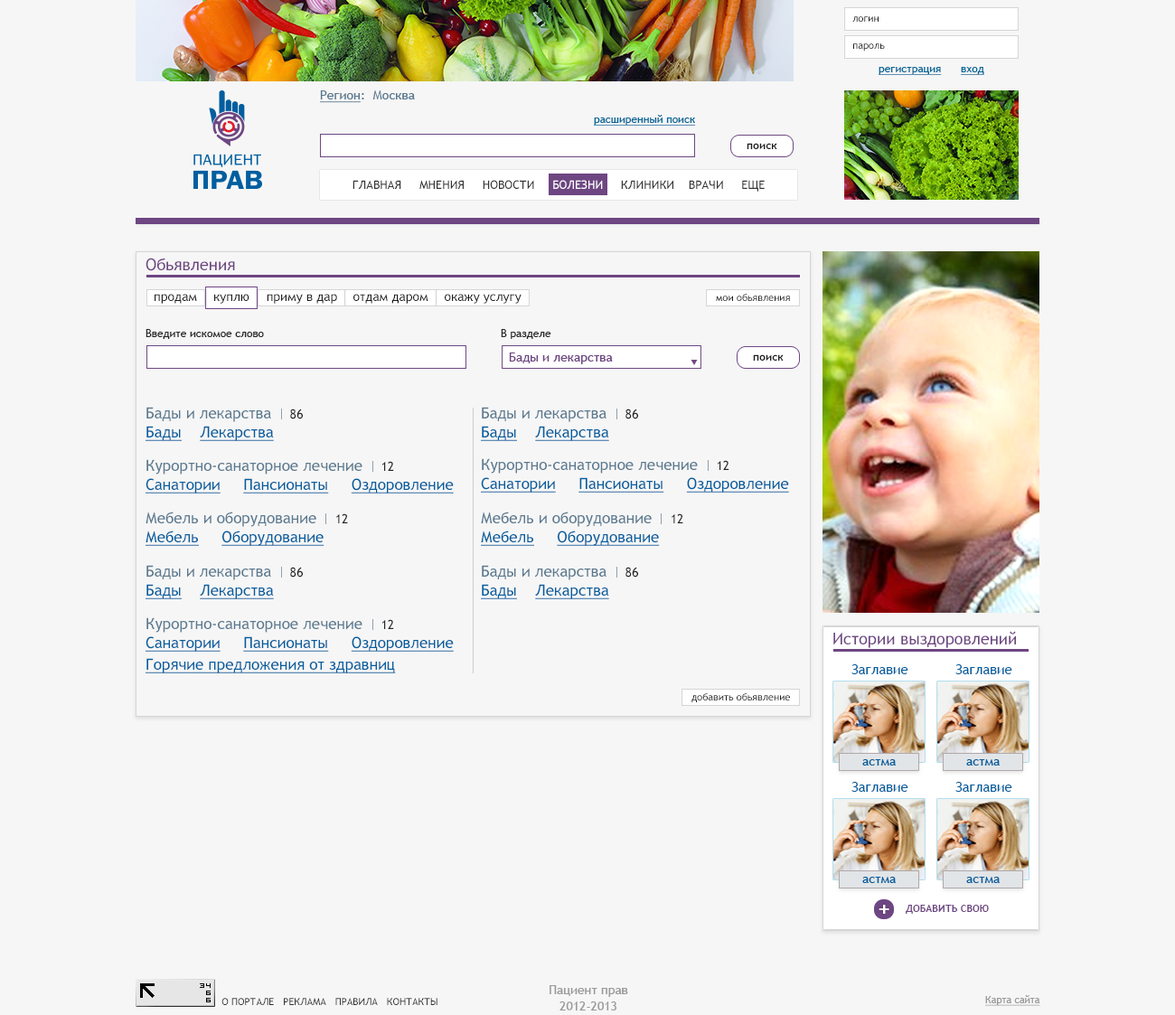
<style>
.page{position:relative;width:1175px;height:1015px;background:#f6f6f6}
.page>*{position:absolute;margin:0}
.t1{font:9.9px "TrebuchetMS";color:#1e1d1d}
.t2{font:10.8px "TrebuchetMS";color:#006699;text-decoration:underline}
.t3{font:12.7px "TrebuchetMS";color:#5a798f}
.t4{font:12.7px "TrebuchetMS";color:#5a798f;text-decoration:underline}
.t5{font:10.8px "TrebuchetMS-Bold";color:#1e1d1d}
.t6{font:11.7px "TrebuchetMS";color:#333333;text-transform:uppercase}
.t7{font:11.7px "TrebuchetMS";color:#ffffff;text-transform:uppercase}
.t8{font:16.3px "TrebuchetMS";color:#6e4682}
.t9{font:12.7px "TrebuchetMS";color:#1e1d1d}
.t10{font:10.8px "TrebuchetMS";color:#252627}
.t11{font:12.7px "TrebuchetMS";color:#6e4682}
.t12{font:15.4px/19px "TrebuchetMS";color:#005e9f;text-decoration:underline}
.t13{font:15.4px/16.3px "TrebuchetMS";color:#5a798f}
.t14{font:12.7px/12.7px "TrebuchetMS";color:#252627}
.t15{font:15.4px/21.7px "TrebuchetMS";color:#005e9f;text-decoration:underline}
.t16{font:13.6px "TrebuchetMS";color:#005e9f}
.t17{font:12.7px "TrebuchetMS";color:#005e9f}
.t18{font:21.7px "TrebuchetMS-Bold";color:#ffffff;text-transform:uppercase}
.t19{font:9.9px "TrebuchetMS-Bold";color:#6e4682;text-transform:uppercase}
.t20{font:12.7px/16.3px "TrebuchetMS";color:#999999}
.t21{font:9.9px "TrebuchetMS";color:#333333;text-transform:uppercase}
.t22{font:9.9px "TrebuchetMS";color:#999999;text-decoration:underline}
</style>
<div class="page">
<p class="t1" style="left:852px;top:16px;width:26px;height:6px">логин</p>
<p class="t1" style="left:853px;top:43px;width:32px;height:9px">пароль</p>
<p class="t2" style="left:878px;top:67px;width:106px;height:8px">регистрация      вход</p>
<p class="t3" style="left:320px;top:90px;width:95px;height:13px"><span class="t4">Регион</span>:  Москва</p>
<p class="t2" style="left:594px;top:115px;width:102px;height:11px">расширенный поиск</p>
<p class="t5" style="left:747px;top:143px;width:30px;height:6px">поиск</p>
<p class="t6" style="left:352px;top:180px;width:413px;height:12px">Главная     Мнения     Новости     <span class="t7">Болезни</span>     Клиники    Врачи     Еще</p>
<p class="t8" style="left:146px;top:258px;width:89px;height:13px">Обьявления</p>
<p class="t9" style="left:155px;top:294px;width:42px;height:10px">продам</p>
<p class="t9" style="left:214px;top:294px;width:35px;height:10px">куплю</p>
<p class="t9" style="left:267px;top:294px;width:70px;height:10px">приму в дар</p>
<p class="t9" style="left:353px;top:294px;width:75px;height:10px">отдам даром</p>
<p class="t9" style="left:445px;top:294px;width:76px;height:10px">окажу услугу</p>
<p class="t1" style="left:716px;top:294px;width:74px;height:7px">мои обьявления</p>
<p class="t10" style="left:146px;top:329px;width:118px;height:10px">Введите искомое слово</p>
<p class="t10" style="left:501px;top:329px;width:50px;height:10px">В разделе</p>
<p class="t11" style="left:509px;top:352px;width:104px;height:12px">Бады и лекарства</p>
<p class="t5" style="left:753px;top:354px;width:31px;height:7px">поиск</p>
<p class="t12" style="left:146px;top:407px;width:157px;height:34px"><span class="t13">Бады и лекарства    </span><span class="t14">86<br></span>Бады    Лекарства</p>
<p class="t12" style="left:481px;top:407px;width:157px;height:34px"><span class="t13">Бады и лекарства    </span><span class="t14">86<br></span>Бады    Лекарства</p>
<p class="t12" style="left:146px;top:459px;width:308px;height:34px"><span class="t13">Курортно-санаторное лечение    </span><span class="t14">12<br></span>Санатории     Пансионаты     Оздоровление</p>
<p class="t12" style="left:481px;top:458px;width:308px;height:35px"><span class="t13">Курортно-санаторное лечение    </span><span class="t14">12<br></span>Санатории     Пансионаты     Оздоровление</p>
<p class="t12" style="left:146px;top:512px;width:202px;height:34px"><span class="t13">Мебель и оборудование    </span><span class="t14">12<br></span>Мебель     Оборудование</p>
<p class="t12" style="left:481px;top:512px;width:202px;height:34px"><span class="t13">Мебель и оборудование    </span><span class="t14">12<br></span>Мебель     Оборудование</p>
<p class="t12" style="left:146px;top:565px;width:157px;height:34px"><span class="t13">Бады и лекарства    </span><span class="t14">86<br></span>Бады    Лекарства</p>
<p class="t12" style="left:481px;top:565px;width:157px;height:34px"><span class="t13">Бады и лекарства    </span><span class="t14">86<br></span>Бады    Лекарства</p>
<p class="t12" style="left:146px;top:617px;width:308px;height:56px"><span class="t13">Курортно-санаторное лечение    </span><span class="t14">12<br></span>Санатории     Пансионаты     Оздоровление<br><span class="t15">Горячие предложения от здравниц</span></p>
<p class="t8" style="left:833px;top:631px;width:183px;height:17px">Истории выздоровлений</p>
<p class="t16" style="left:851px;top:664px;width:57px;height:10px">Заглавие</p>
<p class="t16" style="left:955px;top:664px;width:57px;height:10px">Заглавие</p>
<p class="t1" style="left:691px;top:693px;width:99px;height:9px">добавить обьявление</p>
<p class="t17" style="left:862px;top:759px;width:34px;height:6px">астма</p>
<p class="t17" style="left:966px;top:759px;width:34px;height:6px">астма</p>
<p class="t16" style="left:851px;top:782px;width:57px;height:10px">Заглавие</p>
<p class="t16" style="left:955px;top:782px;width:57px;height:10px">Заглавие</p>
<p class="t17" style="left:862px;top:877px;width:34px;height:6px">астма</p>
<p class="t17" style="left:966px;top:877px;width:34px;height:6px">астма</p>
<p class="t18" style="left:878px;top:905px;width:11px;height:9px">+</p>
<p class="t19" style="left:906px;top:905px;width:83px;height:9px">Добавить свою</p>
<p class="t20" style="left:549px;top:985px;width:79px;height:25px;text-align:center">Пациент прав<br>2012-2013</p>
<p class="t21" style="left:221px;top:998px;width:216px;height:7px">о портале   реклама   правила   контакты</p>
<p class="t22" style="left:985px;top:995px;width:55px;height:11px">Карта сайта</p>
</div>
